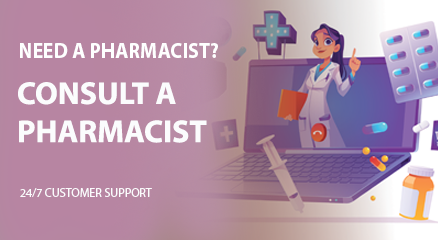
<style>
.page{position:relative;width:438px;height:240px}
.page>*{position:absolute;margin:0}
.t1{font:21.7px "MyriadPro-Bold";color:#feffff;text-transform:uppercase;scale:0.93 1}
.t2{font:31.8px "MyriadPro-Bold";color:#fbfcfd;text-transform:uppercase}
.t3{font:12.1px "MyriadPro-Regular";color:#fbfcfd;text-transform:uppercase}
</style>
<div class="page">
<p class="t1" style="left:20px;top:43px;width:198px;height:15px">Need a pharmacist?</p>
<p class="t2" style="left:18px;top:82px;width:189px;height:61px">Consult a<br>pharmacist</p>
<p class="t3" style="left:20px;top:188px;width:132px;height:9px">24/7 customer support</p>
</div>
